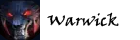
<style>
.page{position:relative;width:140px;height:40px;background:#ffffff}
.page>*{position:absolute;margin:0}
.t1{font:16px "VinerHandITC";color:#000000}
</style>
<div class="page">
<p class="t1" style="left:47px;top:12px;width:72px;height:15px">Warwick</p>
</div>
